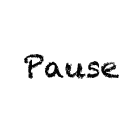
<style>
.page{position:relative;width:140px;height:140px;background:#ffffff}
.page>*{position:absolute;margin:0}
.t1{font:30px "Chalkduster";color:#050505}
</style>
<div class="page">
<p class="t1" style="left:24px;top:54px;width:95px;height:25px">Pause</p>
</div>
